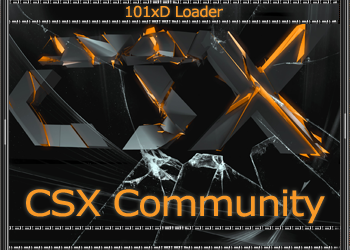
<style>
.page{position:relative;width:350px;height:250px;background:#0c0c0c}
.page>*{position:absolute;margin:0}
.t1{font:15px "Verdana";letter-spacing:-0.04em;color:#f99927}
.t2{font:36px "Verdana";letter-spacing:-0.04em;color:#f99927;scale:1.09 1}
</style>
<div class="page">
<p class="t1" style="left:126px;top:5px;width:97px;height:13px">101xD Loader</p>
<p class="t2" style="left:26px;top:189px;width:299px;height:35px">CSX Community</p>
</div>
